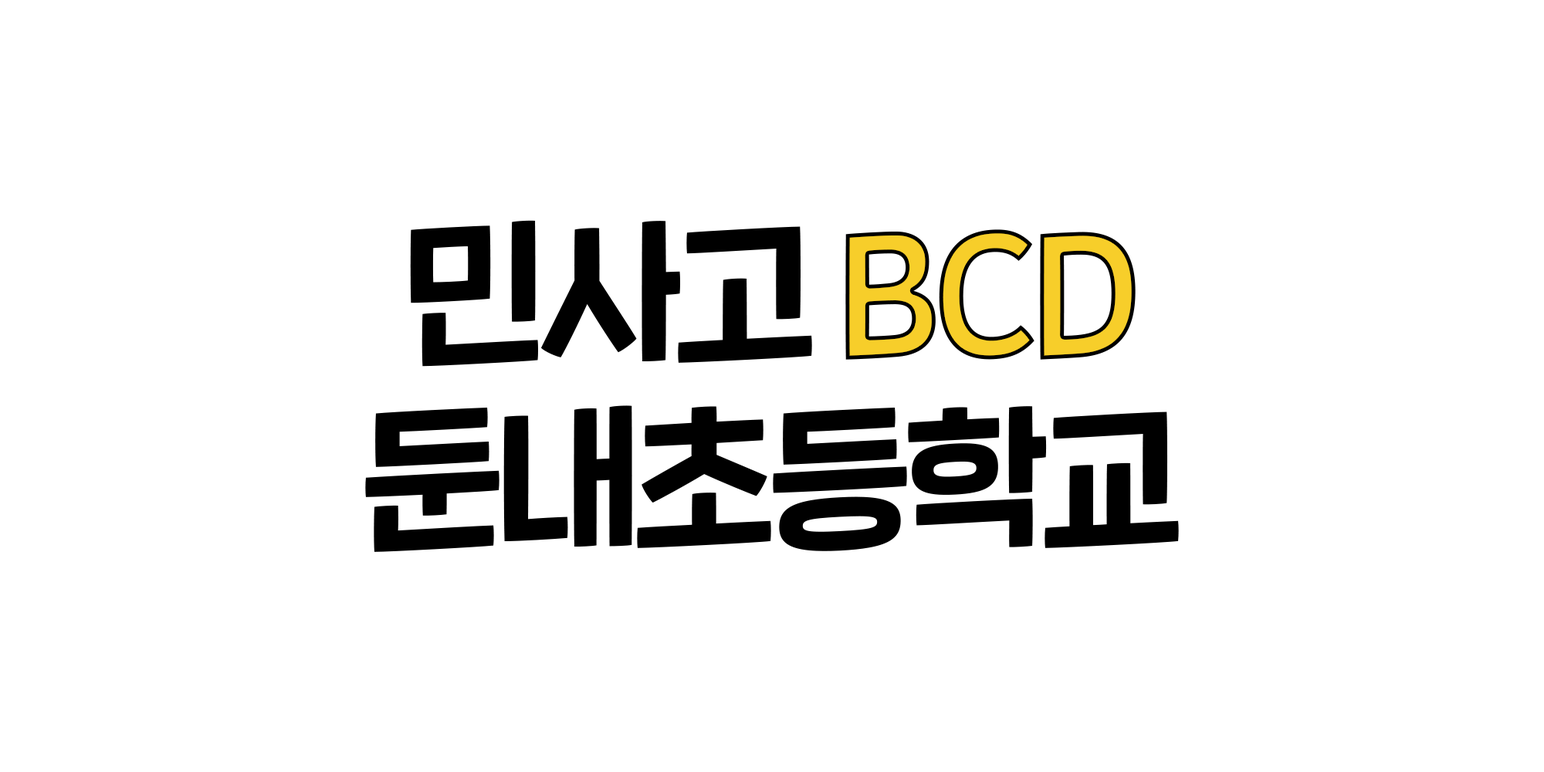
<style>
.page{position:relative;width:1544px;height:772px;background:#ffffff}
.page>*{position:absolute;margin:0}
.t1{font:154.4px "SDNemony-bOblique";letter-spacing:-0.04em;color:#000000}
.t2{font:154.4px "SDNemony-bOblique";letter-spacing:-0.04em;color:#f7ce2a}
</style>
<div class="page">
<p class="t1" style="left:365px;top:220px;width:814px;height:332px;text-align:center">민사고 <span class="t2">BCD<br></span>둔내초등학교</p>
</div>
